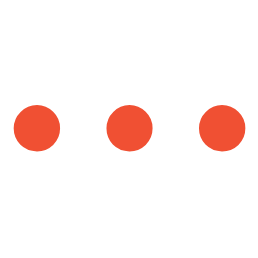
<style>
.page{position:relative;width:258px;height:258px;background:#ffffff}
.page>*{position:absolute;margin:0}
.t1{font:277.8px "Georgia-Bold";color:#f05033}
</style>
<div class="page">
<p class="t1" style="left:13px;top:105px;width:233px;height:47px">…</p>
</div>
